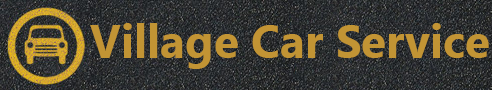
<style>
.page{position:relative;width:492px;height:90px}
.page>*{position:absolute;margin:0}
.t1{font:46px "MyanmarText-Bold";color:#c29434}
</style>
<div class="page">
<p class="t1" style="left:90px;top:23px;width:399px;height:46px">Village Car Service</p>
</div>
